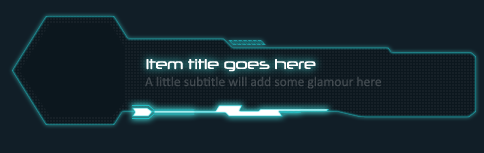
<style>
.page{position:relative;width:484px;height:153px;background:#111e27}
.page>*{position:absolute;margin:0}
.t1{font:13.6px "Neuropol-Regular";color:#ffffff}
.t2{font:13.6px "Calibri";color:#3d454b}
</style>
<div class="page">
<p class="t1" style="left:146px;top:59px;width:170px;height:13px">Item title goes here</p>
<p class="t2" style="left:145px;top:76px;width:236px;height:13px">A little subtitle will add some glamour here</p>
</div>
